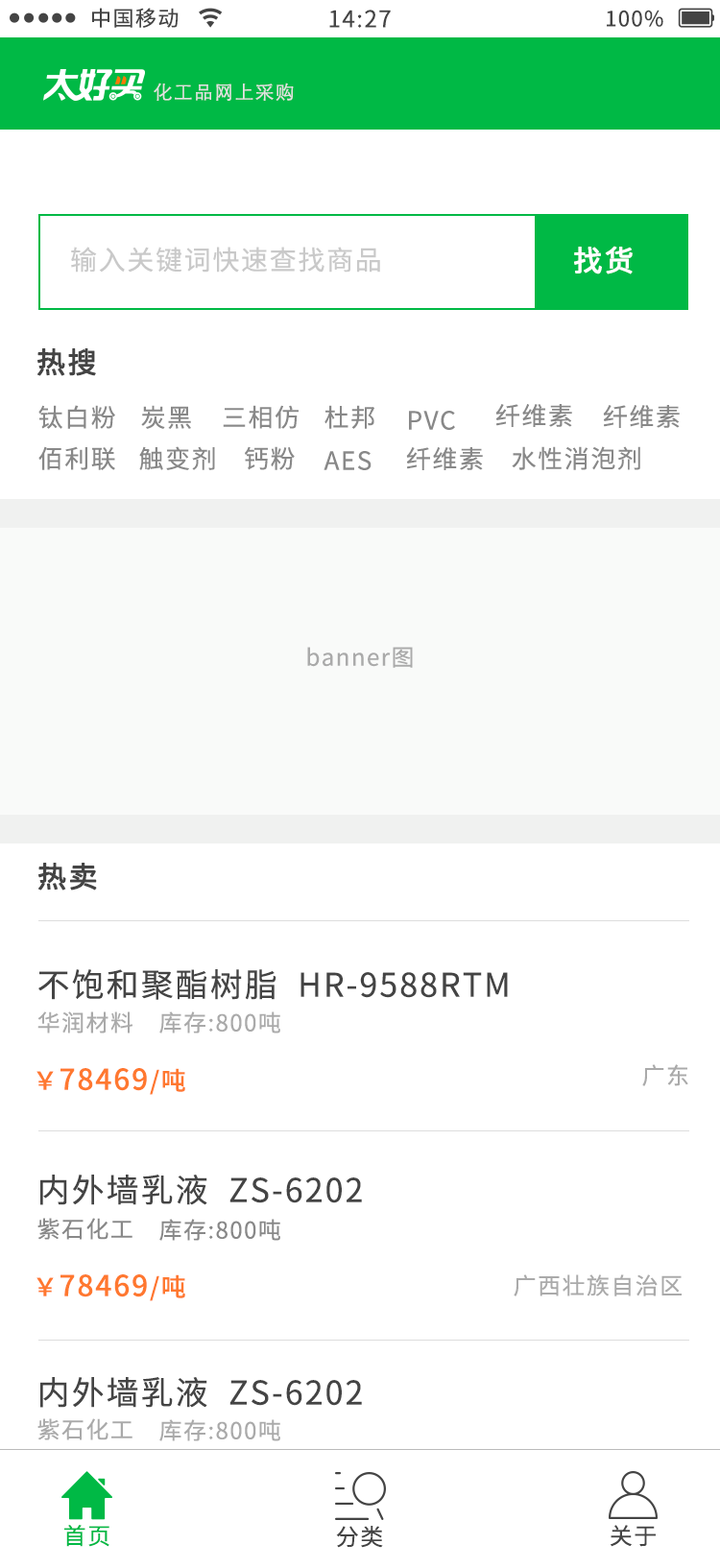
<style>
.page{position:relative;width:720px;height:1568px;background:#ffffff}
.page>*{position:absolute;margin:0}
.t1{font:21.1px "NotoSansCJKsc-Regular";letter-spacing:0.06em;color:#444444}
.t2{font:23px "NotoSansCJKsc-Regular";letter-spacing:0.06em;color:#444444}
.t3{font:19.2px "STXihei";letter-spacing:0.06em;color:#e2e2e2}
.t4{font:28.8px "NotoSansCJKsc-Regular";letter-spacing:0.06em;color:#ffffff;font-weight:bold}
.t5{font:26.9px "NotoSansCJKsc-Regular";letter-spacing:0.06em;color:#c9c9c9}
.t6{font:28.8px "NotoSansCJKsc-Regular";letter-spacing:0.06em;color:#444444;font-weight:bold}
.t7{font:24.9px "NotoSansCJKsc-Regular";letter-spacing:0.06em;color:#888888}
.t8{font:23px "NotoSansCJKsc-Regular";letter-spacing:0.06em;color:#aaaaaa}
.t9{font:32.6px "NotoSansCJKsc-Regular";letter-spacing:0.06em;color:#444444}
.t10{font:28.8px "NotoSansCJKsc-Medium";letter-spacing:0.06em;color:#ff782f}
.t11{font:24.9px "NotoSansCJKsc-Medium";letter-spacing:0.06em;color:#ff782f}
.t12{font:23px "NotoSansCJKsc-Regular";letter-spacing:0.06em;color:#888888}
.t13{font:23px "NotoSansCJKsc-Regular";letter-spacing:0.06em;color:#00b945}
</style>
<div class="page">
<p class="t1" style="left:92px;top:8px;width:86px;height:20px">中国移动</p>
<p class="t2" style="left:329px;top:10px;width:62px;height:18px">14:27</p>
<p class="t1" style="left:606px;top:10px;width:57px;height:17px">100%</p>
<p class="t3" style="left:154px;top:83px;width:140px;height:18px">化工品网上采购</p>
<p class="t4" style="left:574px;top:246px;width:58px;height:28px">找货</p>
<p class="t5" style="left:71px;top:247px;width:309px;height:26px">输入关键词快速查找商品</p>
<p class="t6" style="left:37px;top:348px;width:59px;height:28px">热搜</p>
<p class="t7" style="left:38px;top:405px;width:77px;height:24px">钛白粉</p>
<p class="t7" style="left:141px;top:405px;width:50px;height:24px">炭黑</p>
<p class="t7" style="left:223px;top:405px;width:75px;height:24px">三相仿</p>
<p class="t7" style="left:324px;top:405px;width:50px;height:24px">杜邦</p>
<p class="t7" style="left:409px;top:411px;width:46px;height:19px">PVC</p>
<p class="t7" style="left:495px;top:404px;width:77px;height:23px">纤维素</p>
<p class="t7" style="left:603px;top:405px;width:76px;height:23px">纤维素</p>
<p class="t7" style="left:38px;top:446px;width:77px;height:24px">佰利联</p>
<p class="t7" style="left:139px;top:446px;width:76px;height:24px">触变剂</p>
<p class="t7" style="left:245px;top:446px;width:50px;height:24px">钙粉</p>
<p class="t7" style="left:406px;top:447px;width:77px;height:23px">纤维素</p>
<p class="t7" style="left:511px;top:446px;width:129px;height:24px">水性消泡剂</p>
<p class="t7" style="left:323px;top:451px;width:48px;height:19px">AES</p>
<p class="t8" style="left:307px;top:647px;width:106px;height:21px">banner图</p>
<p class="t6" style="left:38px;top:863px;width:59px;height:28px">热卖</p>
<p class="t9" style="left:38px;top:969px;width:470px;height:31px">不饱和聚酯树脂  HR-9588RTM</p>
<p class="t8" style="left:37px;top:1011px;width:95px;height:22px">华润材料</p>
<p class="t8" style="left:159px;top:1011px;width:121px;height:22px">库存:800吨</p>
<p class="t10" style="left:36px;top:1068px;width:149px;height:27px"><span class="t11">￥</span>78469<span class="t11">/吨</span></p>
<p class="t8" style="left:642px;top:1064px;width:46px;height:22px">广东</p>
<p class="t9" style="left:40px;top:1175px;width:322px;height:30px">内外墙乳液  ZS-6202</p>
<p class="t12" style="left:37px;top:1218px;width:95px;height:22px">紫石化工</p>
<p class="t12" style="left:159px;top:1219px;width:121px;height:22px">库存:800吨</p>
<p class="t10" style="left:36px;top:1274px;width:149px;height:27px"><span class="t11">￥</span>78469<span class="t11">/吨</span></p>
<p class="t8" style="left:513px;top:1274px;width:168px;height:22px">广西壮族自治区</p>
<p class="t9" style="left:40px;top:1377px;width:322px;height:31px">内外墙乳液  ZS-6202</p>
<p class="t8" style="left:37px;top:1418px;width:95px;height:22px">紫石化工</p>
<p class="t8" style="left:159px;top:1419px;width:121px;height:22px">库存:800吨</p>
<p class="t13" style="left:64px;top:1525px;width:45px;height:22px">首页</p>
<p class="t2" style="left:336px;top:1526px;width:47px;height:22px">分类</p>
<p class="t2" style="left:610px;top:1525px;width:45px;height:22px">关于</p>
</div>
